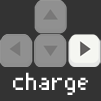
<style>
.page{position:relative;width:101px;height:101px;background:#333333}
.page>*{position:absolute;margin:0}
.t1{font:32px "Pixelade";letter-spacing:0.02em;color:#ffffff}
</style>
<div class="page">
<p class="t1" style="left:13px;top:72px;width:75px;height:23px">charge</p>
</div>
